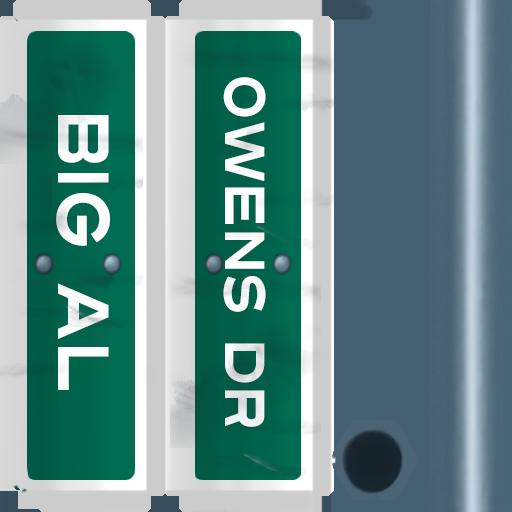
<style>
.page{position:relative;width:512px;height:512px}
.page>*{position:absolute;margin:0}
.t1{font:56px "Turnpike";color:#fefeff;scale:0.75 1}
.t2{font:72px "Turnpike";color:#fefeff;scale:0.75 1}
</style>
<div class="page">
<p class="t1" style="left:223px;top:77px;width:43px;height:350px;rotate:90deg">Owens Dr</p>
<p class="t2" style="left:56px;top:115px;width:54px;height:275px;rotate:90deg">Big Al</p>
</div>
